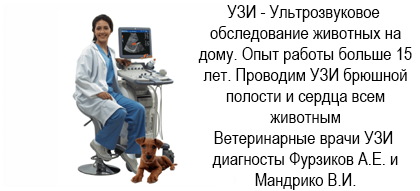
<style>
.page{position:relative;width:420px;height:191px;background:#ffffff}
.page>*{position:absolute;margin:0}
.t1{font:18px/7px "ArialNarrow";letter-spacing:0.002em;color:#050505}
</style>
<div class="page">
<p class="t1" style="left:198px;top:5px;width:214px;height:185px;text-align:center">УЗИ - Ультрозвуковое<br><br><br> обследование животных на<br><br><br> дому. Опыт работы больше 15<br><br><br> лет. Проводим УЗИ брюшной<br><br><br> полости и сердца всем<br><br><br> животным<br><br>.<br>Ветеринарные врачи УЗИ<br><br><br> диагносты Фурзиков А.Е. и<br><br><br> Мандрико В.И.</p>
</div>
